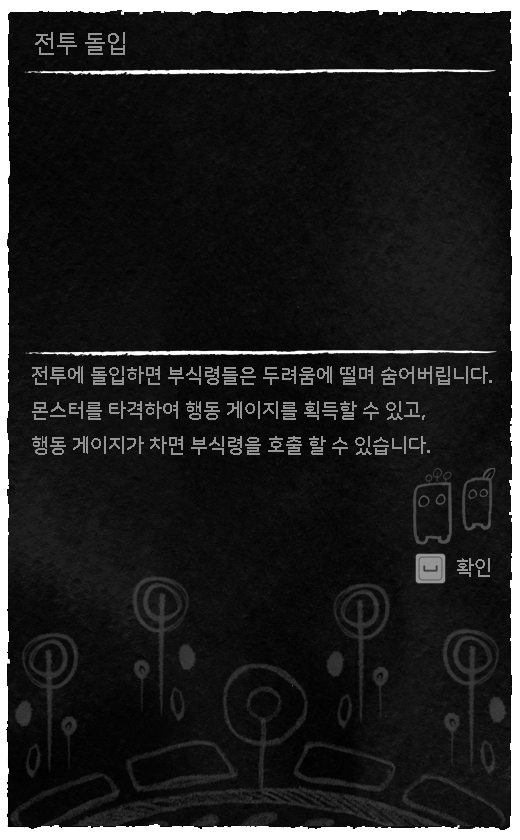
<style>
.page{position:relative;width:520px;height:840px}
.page>*{position:absolute;margin:0}
.t1{font:24px "NanumSquareRoundB";color:#939393}
.t2{font:20px "NanumSquareRoundB";color:#939393}
</style>
<div class="page">
<p class="t1" style="left:35px;top:32px;width:90px;height:23px">전투 돌입</p>
<p class="t2" style="left:32px;top:366px;width:460px;height:89px">전투에 돌입하면 부식령들은 두려움에 떨며 숨어버립니다.<br>몬스터를 타격하여 행동 게이지를 획득할 수 있고,<br>행동 게이지가 차면 부식령을 호출 할 수 있습니다.</p>
<p class="t2" style="left:457px;top:558px;width:33px;height:19px">확인</p>
</div>
